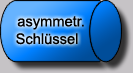
<style>
.page{position:relative;width:133px;height:73px}
.page>*{position:absolute;margin:0}
.t1{font:14.7px "ArialMT";color:#000000}
</style>
<div class="page">
<p class="t1" style="left:16px;top:16px;width:68px;height:29px;text-align:center">asymmetr.<br> Schlüssel</p>
</div>
